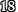
<style>
.page{position:relative;width:18px;height:12px;background:#ffffff}
.page>*{position:absolute;margin:0}
.t1{font:17px "Perpetua-Bold";color:#ffffff}
</style>
<div class="page">
<p class="t1" style="left:1px;top:1px;width:14px;height:10px">18</p>
</div>
